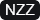
<style>
.page{position:relative;width:40px;height:20px;background:#151618}
.page>*{position:absolute;margin:0}
.t1{font:16.7px "ArialMT";letter-spacing:0.018em}
</style>
<div class="page">
<p class="t1" style="left:5px;top:3px;width:32px;height:13px">NZZ</p>
</div>
